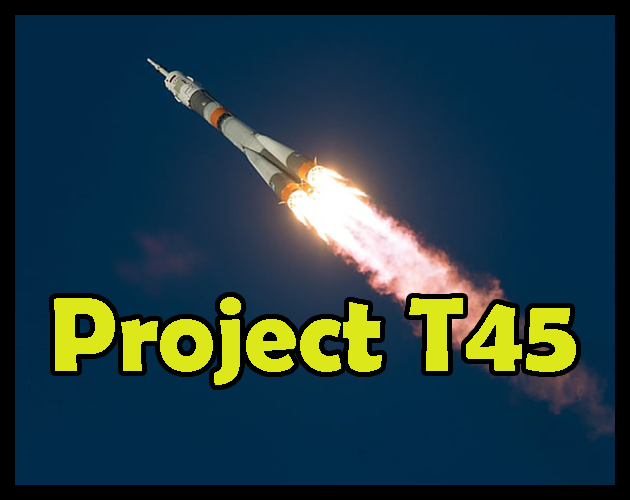
<style>
.page{position:relative;width:630px;height:500px}
.page>*{position:absolute;margin:0}
.t1{font:106.7px "BerlinSansFBDemi-Bold";color:#dce81a}
</style>
<div class="page">
<p class="t1" style="left:54px;top:297px;width:522px;height:88px">Project T45</p>
</div>
